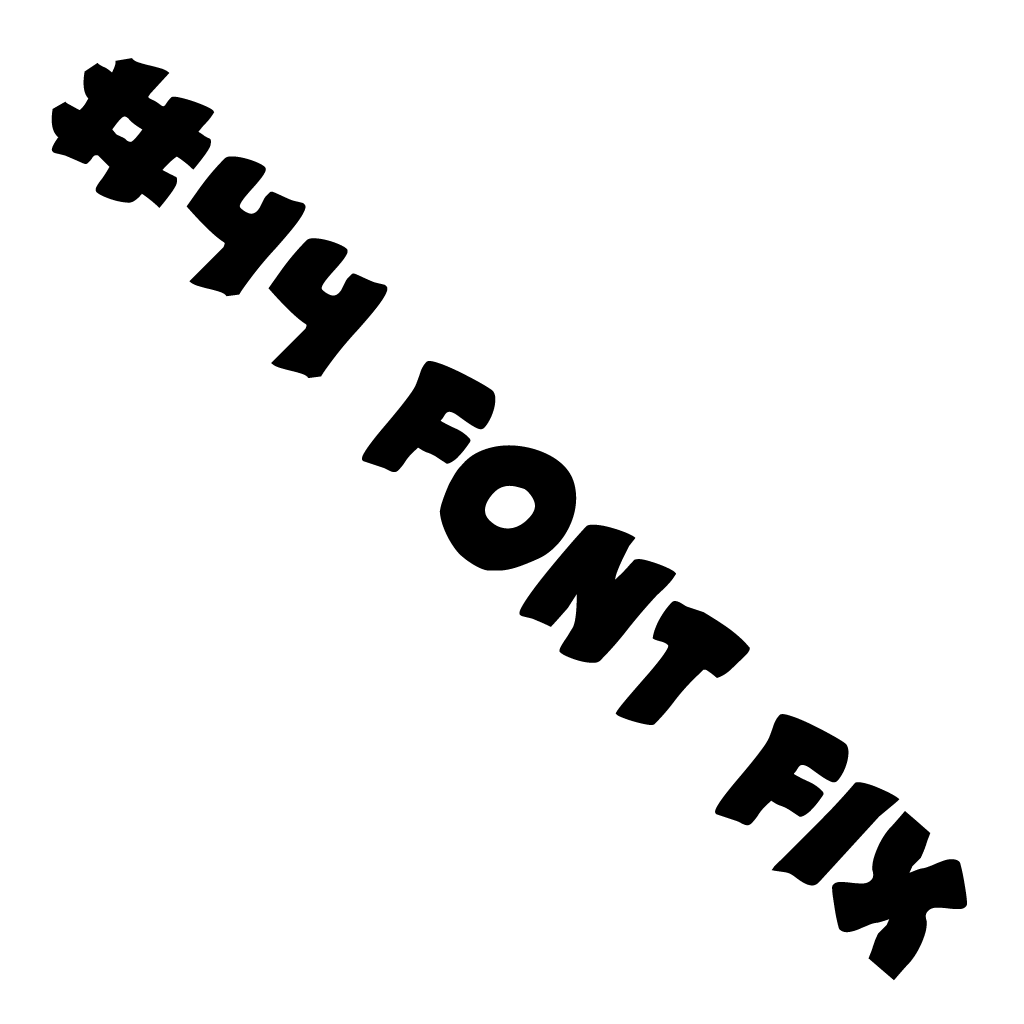
<style>
.page{position:relative;width:1024px;height:1024px;background:#ffffff}
.page>*{position:absolute;margin:0}
.t1{font:193px "#44Font";color:#000000}
</style>
<div class="page">
<p class="t1" style="left:51px;top:58px;width:916px;height:923px;rotate:45deg">#44 font fix</p>
</div>
